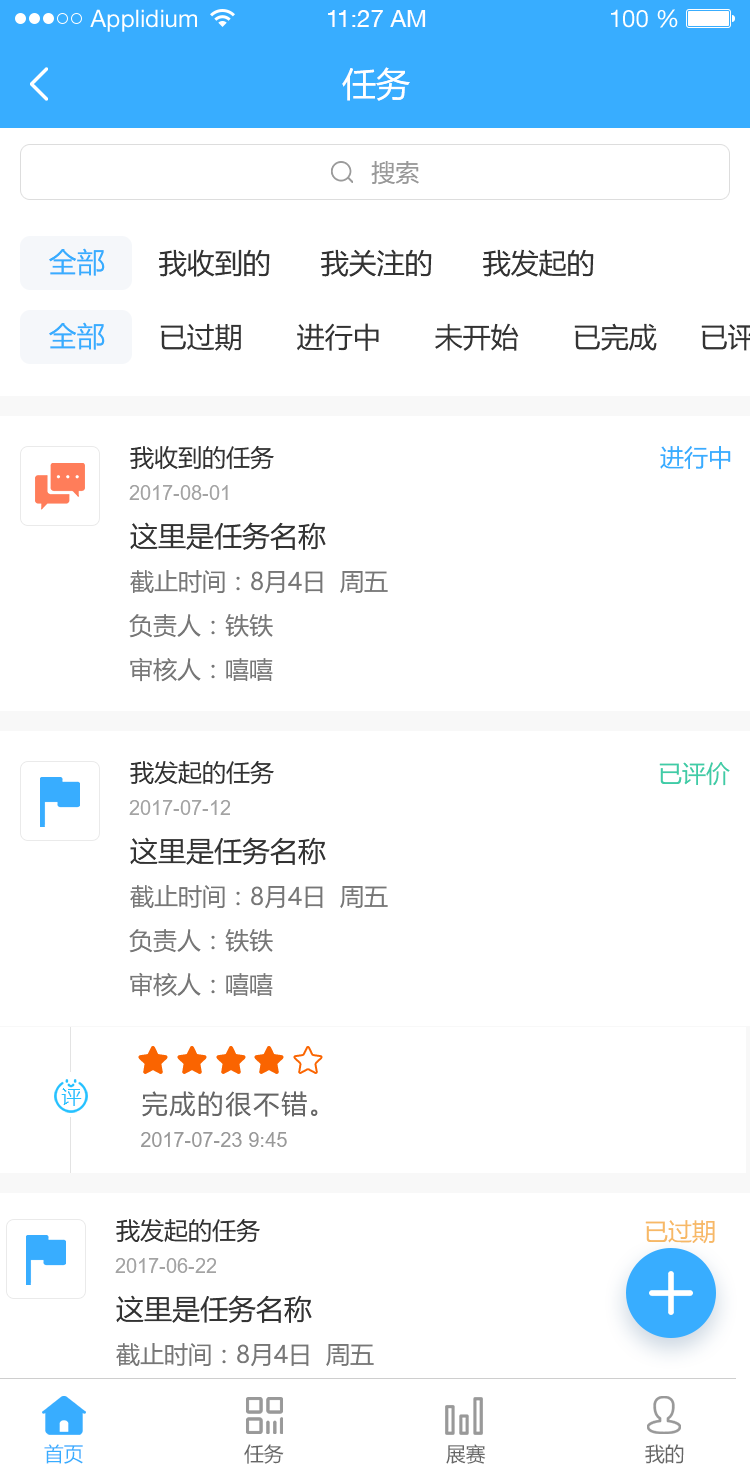
<style>
.page{position:relative;width:750px;height:1482px;background:#ffffff}
.page>*{position:absolute;margin:0}
.t1{font:24px "HelveticaNeueLTStd-Roman";color:#ffffff}
.t2{font:24px "HelveticaNeueCE-Roman";color:#ffffff}
.t3{font:34px "MicrosoftYaHei";color:#ffffff}
.t4{font:24px "MicrosoftYaHei";color:#999999}
.t5{font:28px "MicrosoftYaHei";color:#38adff}
.t6{font:28px "MicrosoftYaHei";color:#333333}
.t7{font:24px "MicrosoftYaHei";color:#333333}
.t8{font:24px "MicrosoftYaHei";color:#38adff}
.t9{font:20px "ArialMT";color:#a3a3a3}
.t10{font:24px "MicrosoftYaHei";color:#777777}
.t11{font:24px "MicrosoftYaHei";color:#3fcca7}
.t12{font:20px "MicrosoftYaHei";letter-spacing:0.075em;color:#25c1ff}
.t13{font:26px "MicrosoftYaHei";letter-spacing:0.075em;color:#666666}
.t14{font:20px "ArialMT";color:#999999}
.t15{font:24px "MicrosoftYaHei";color:#f7b966}
.t16{font:20px "MicrosoftYaHei";color:#38adff;text-transform:uppercase}
.t17{font:20px "MicrosoftYaHei";color:#666666;text-transform:uppercase}
</style>
<div class="page">
<p class="t1" style="left:90px;top:9px;width:107px;height:23px">Applidium</p>
<p class="t2" style="left:328px;top:10px;width:98px;height:17px">11:27 AM</p>
<p class="t1" style="left:611px;top:9px;width:67px;height:19px">100 %</p>
<p class="t3" style="left:342px;top:67px;width:68px;height:34px">任务</p>
<p class="t4" style="left:371px;top:161px;width:48px;height:24px">搜索</p>
<p class="t5" style="left:49px;top:248px;width:56px;height:28px">全部</p>
<p class="t6" style="left:159px;top:249px;width:111px;height:28px">我收到的</p>
<p class="t6" style="left:321px;top:249px;width:111px;height:28px">我关注的</p>
<p class="t6" style="left:483px;top:249px;width:111px;height:28px">我发起的</p>
<p class="t5" style="left:49px;top:322px;width:56px;height:28px">全部</p>
<p class="t6" style="left:160px;top:323px;width:81px;height:28px">已过期</p>
<p class="t6" style="left:297px;top:323px;width:82px;height:28px">进行中</p>
<p class="t6" style="left:435px;top:323px;width:84px;height:28px">未开始</p>
<p class="t6" style="left:574px;top:323px;width:83px;height:28px">已完成</p>
<p class="t7" style="left:130px;top:445px;width:144px;height:25px">我收到的任务</p>
<p class="t8" style="left:660px;top:446px;width:71px;height:24px">进行中</p>
<p class="t9" style="left:129px;top:485px;width:99px;height:15px">2017-08-01</p>
<p class="t6" style="left:130px;top:522px;width:196px;height:28px">这里是任务名称</p>
<p class="t10" style="left:130px;top:570px;width:258px;height:24px">截止时间：8月4日  周五</p>
<p class="t10" style="left:129px;top:614px;width:144px;height:24px">负责人：铁铁</p>
<p class="t10" style="left:130px;top:657px;width:143px;height:25px">审核人：嘻嘻</p>
<p class="t7" style="left:130px;top:760px;width:144px;height:25px">我发起的任务</p>
<p class="t11" style="left:659px;top:762px;width:71px;height:24px">已评价</p>
<p class="t9" style="left:129px;top:800px;width:101px;height:15px">2017-07-12</p>
<p class="t6" style="left:130px;top:837px;width:196px;height:28px">这里是任务名称</p>
<p class="t10" style="left:130px;top:885px;width:258px;height:24px">截止时间：8月4日  周五</p>
<p class="t10" style="left:129px;top:929px;width:144px;height:24px">负责人：铁铁</p>
<p class="t10" style="left:130px;top:972px;width:143px;height:25px">审核人：嘻嘻</p>
<p class="t12" style="left:61px;top:1088px;width:21px;height:18px">评</p>
<p class="t13" style="left:142px;top:1091px;width:176px;height:26px">完成的很不错。</p>
<p class="t14" style="left:141px;top:1132px;width:146px;height:15px">2017-07-23 9:45</p>
<p class="t7" style="left:116px;top:1218px;width:144px;height:25px">我发起的任务</p>
<p class="t15" style="left:645px;top:1220px;width:70px;height:24px">已过期</p>
<p class="t9" style="left:115px;top:1258px;width:101px;height:15px">2017-06-22</p>
<p class="t6" style="left:116px;top:1295px;width:196px;height:28px">这里是任务名称</p>
<p class="t10" style="left:116px;top:1343px;width:258px;height:24px">截止时间：8月4日  周五</p>
<p class="t16" style="left:44px;top:1444px;width:39px;height:20px">首页</p>
<p class="t17" style="left:244px;top:1444px;width:40px;height:20px">任务</p>
<p class="t17" style="left:446px;top:1444px;width:40px;height:20px">展赛</p>
<p class="t17" style="left:645px;top:1444px;width:39px;height:20px">我的</p>
</div>
